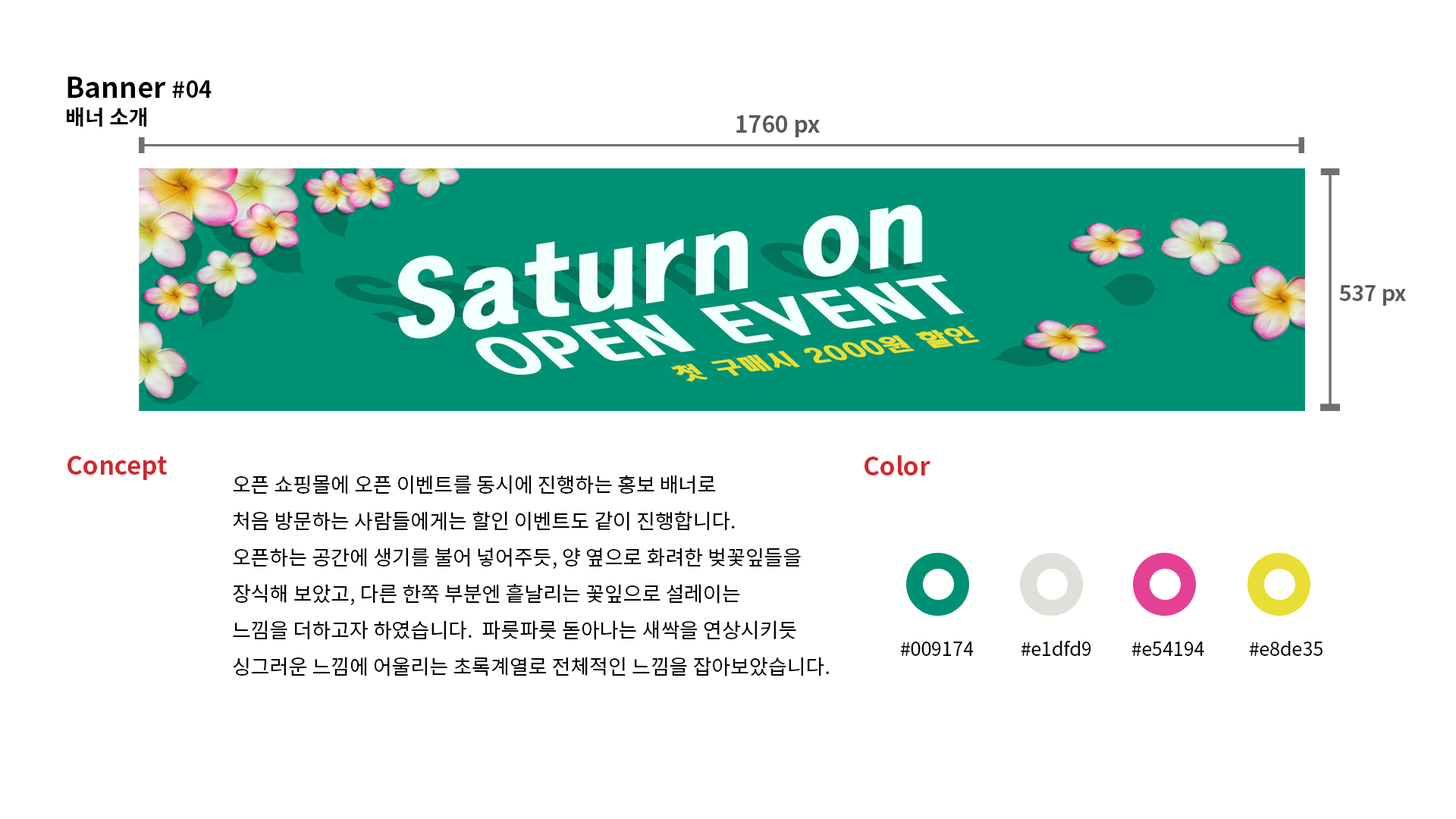
<style>
.page{position:relative;width:1456px;height:819px;background:#ffffff}
.page>*{position:absolute;margin:0}
.t1{font:28.1px/27.3px "NotoSansCJKkr-Bold";color:#000000}
.t2{font:22.7px/27.3px "NotoSansCJKkr-Bold";color:#000000}
.t3{font:21.2px/27.3px "NotoSansCJKkr-Bold";color:#000000}
.t4{font:22.7px "NotoSansCJKkr-Bold";color:#585858}
.t5{font:21.2px "NotoSansCJKkr-Bold";color:#585858}
.t6{font:25px "NotoSansCJKkr-Bold";color:#d12830}
.t7{font:20.5px/36.4px "NotoSansCJKkr-Regular";color:#000000}
.t8{font:19px "NotoSansCJKkr-Regular";color:#000000}
</style>
<div class="page">
<p class="t1" style="left:67px;top:77px;width:145px;height:50px">Banner <span class="t2">#04<br></span><span class="t3">배너 소개</span></p>
<p class="t4" style="left:736px;top:115px;width:84px;height:22px">1760 px</p>
<p class="t5" style="left:1339px;top:285px;width:67px;height:21px">537 px</p>
<p class="t6" style="left:67px;top:456px;width:100px;height:24px">Concept</p>
<p class="t6" style="left:864px;top:455px;width:66px;height:20px">Color</p>
<p class="t7" style="left:233px;top:475px;width:596px;height:201px">오픈 쇼핑몰에 오픈 이벤트를 동시에 진행하는 홍보 배너로 <br>처음 방문하는 사람들에게는 할인 이벤트도 같이 진행합니다. <br>오픈하는 공간에 생기를 불어 넣어주듯, 양 옆으로 화려한 벚꽃잎들을 <br>장식해 보았고, 다른 한쪽 부분엔 흩날리는 꽃잎으로 설레이는 <br>느낌을 더하고자 하였습니다.  파릇파릇 돋아나는 새싹을 연상시키듯 <br>싱그러운 느낌에 어울리는 초록계열로 전체적인 느낌을 잡아보았습니다.</p>
<p class="t8" style="left:900px;top:642px;width:74px;height:14px">#009174</p>
<p class="t8" style="left:1021px;top:640px;width:70px;height:16px">#e1dfd9</p>
<p class="t8" style="left:1131px;top:642px;width:73px;height:14px">#e54194</p>
<p class="t8" style="left:1249px;top:641px;width:74px;height:15px">#e8de35</p>
</div>
